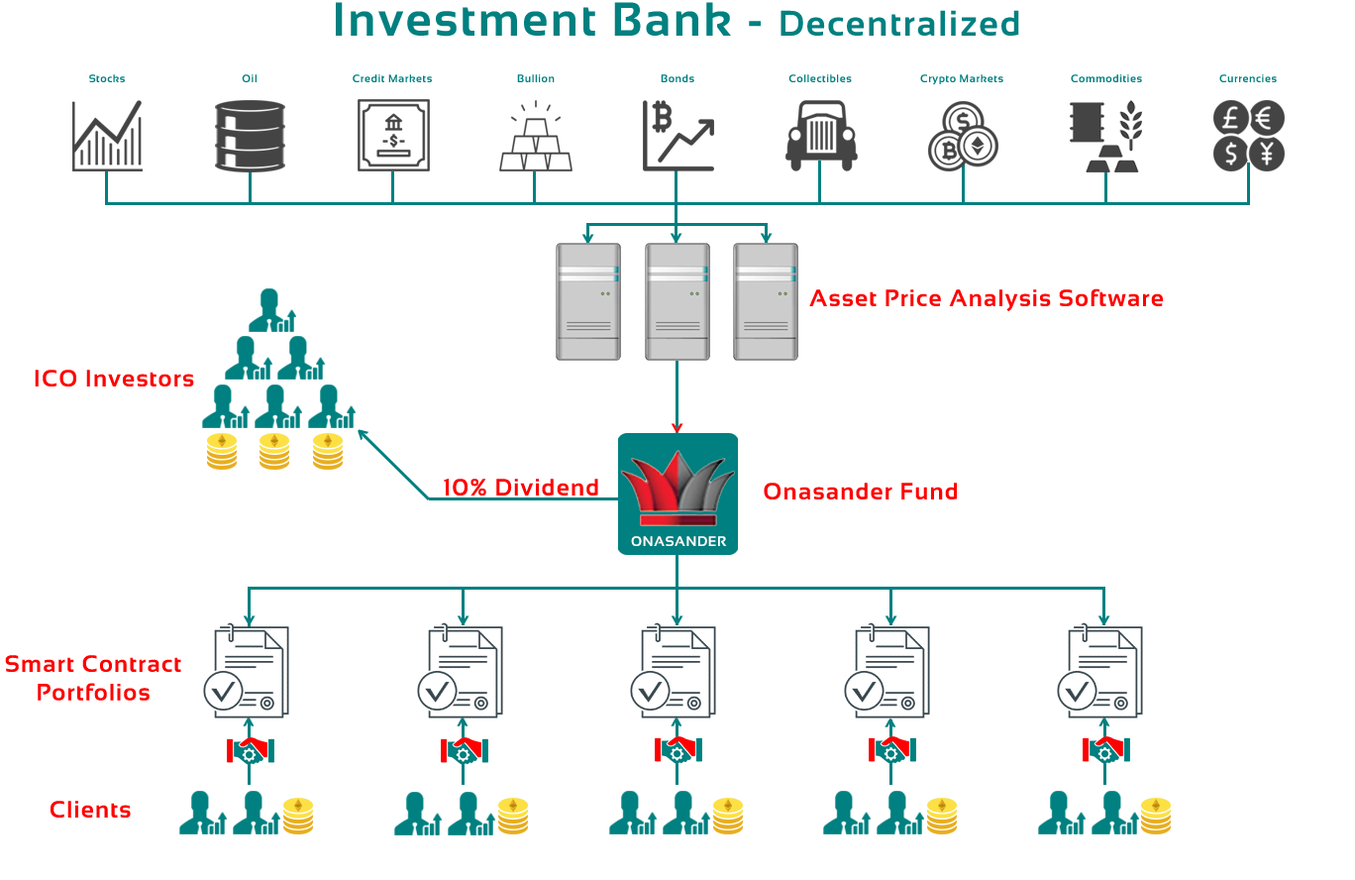
<style>
.page{position:relative;width:1355px;height:880px;background:#ffffff}
.page>*{position:absolute;margin:0}
.t1{font:47.6px "Sansation-Bold";letter-spacing:0.05em;color:#008080}
.t2{font:35.7px "Sansation-Bold";letter-spacing:0.05em;color:#008080}
.t3{font:10.9px "Sansation-Bold";letter-spacing:0.05em;color:#008080}
.t4{font:24.2px "Sansation-Bold";letter-spacing:0.05em;color:#008080}
.t5{font:23.8px "Sansation-Bold";letter-spacing:0.05em;color:#ff0000}
.t6{font:24.2px "Sansation-Bold";letter-spacing:0.05em;color:#ff0000}
.t7{font:23.8px "Sansation-Bold";letter-spacing:0.05em;color:#008080}
</style>
<div class="page">
<p class="t1" style="left:336px;top:2px;width:683px;height:35px">Investment Bank - <span class="t2">Decentralized</span></p>
<p class="t3" style="left:89px;top:74px;width:36px;height:8px">Stocks</p>
<p class="t3" style="left:242px;top:74px;width:15px;height:8px">Oil</p>
<p class="t3" style="left:353px;top:74px;width:79px;height:8px">Credit Markets</p>
<p class="t3" style="left:517px;top:74px;width:38px;height:8px">Bullion</p>
<p class="t3" style="left:661px;top:74px;width:34px;height:8px">Bonds</p>
<p class="t3" style="left:789px;top:74px;width:63px;height:8px">Collectibles</p>
<p class="t3" style="left:920px;top:74px;width:84px;height:11px">Crypto Markets</p>
<p class="t3" style="left:1071px;top:74px;width:71px;height:8px">Commodities</p>
<p class="t3" style="left:1220px;top:74px;width:57px;height:8px">Currencies</p>
<p class="t4" style="left:582px;top:234px;width:12px;height:10px;rotate:180deg">^</p>
<p class="t4" style="left:670px;top:233px;width:13px;height:10px;rotate:180deg">^</p>
<p class="t4" style="left:760px;top:233px;width:13px;height:10px;rotate:180deg">^</p>
<p class="t5" style="left:809px;top:288px;width:354px;height:23px">Asset Price Analysis Software</p>
<p class="t5" style="left:35px;top:370px;width:159px;height:16px">ICO Investors</p>
<p class="t6" style="left:671px;top:423px;width:13px;height:10px;rotate:180deg">^</p>
<p class="t4" style="left:358px;top:429px;width:12px;height:12px;rotate:-47deg">^</p>
<p class="t5" style="left:444px;top:479px;width:154px;height:16px">10% Dividend</p>
<p class="t5" style="left:764px;top:482px;width:193px;height:17px">Onasander Fund</p>
<p class="t4" style="left:243px;top:615px;width:13px;height:10px;rotate:180deg">^</p>
<p class="t4" style="left:457px;top:615px;width:13px;height:10px;rotate:180deg">^</p>
<p class="t4" style="left:671px;top:615px;width:13px;height:10px;rotate:180deg">^</p>
<p class="t4" style="left:885px;top:615px;width:13px;height:10px;rotate:180deg">^</p>
<p class="t4" style="left:1098px;top:615px;width:13px;height:10px;rotate:180deg">^</p>
<p class="t5" style="left:5px;top:655px;width:176px;height:45px;text-align:center">Smart Contract<br>Portfolios</p>
<p class="t7" style="left:243px;top:717px;width:12px;height:9px">^</p>
<p class="t7" style="left:457px;top:717px;width:12px;height:9px">^</p>
<p class="t7" style="left:671px;top:717px;width:12px;height:9px">^</p>
<p class="t7" style="left:885px;top:718px;width:12px;height:9px">^</p>
<p class="t7" style="left:1099px;top:717px;width:12px;height:9px">^</p>
<p class="t5" style="left:51px;top:801px;width:80px;height:16px">Clients</p>
</div>
